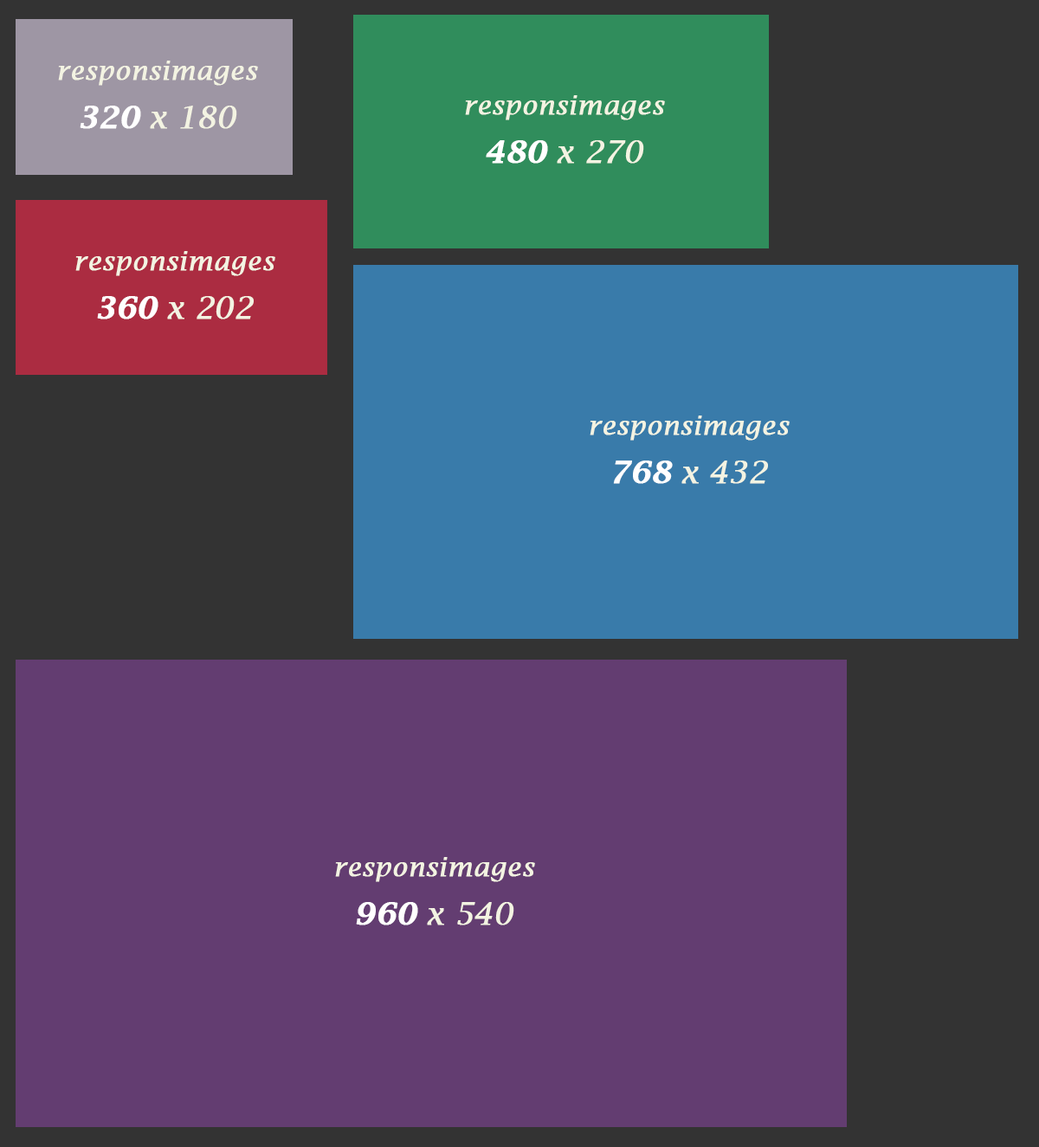
<style>
.page{position:relative;width:1039px;height:1147px;background:#633d71}
.page>*{position:absolute;margin:0}
.t1{font:26px/24.2px "LucidaBright-Italic";letter-spacing:0.025em;color:#f3f3e2;font-weight:bold}
.t2{font:31.2px/24.2px "LucidaBright-DemiItalic";color:#ffffff;font-weight:bold}
.t3{font:31.2px/24.2px "LucidaBright-Italic";color:#f3f3e2;font-weight:bold}
</style>
<div class="page">
<p class="t1" style="left:58px;top:61px;width:200px;height:68px;text-align:center">responsimages<br><br><span class="t2">320</span><span class="t3"> x 180</span></p>
<p class="t1" style="left:465px;top:95px;width:200px;height:69px;text-align:center">responsimages<br><br><span class="t2">480</span><span class="t3"> x 270</span></p>
<p class="t1" style="left:75px;top:251px;width:200px;height:69px;text-align:center">responsimages<br><br><span class="t2">360</span><span class="t3"> x 202</span></p>
<p class="t1" style="left:590px;top:416px;width:200px;height:68px;text-align:center">responsimages<br><br><span class="t2">768</span><span class="t3"> x 432</span></p>
<p class="t1" style="left:335px;top:857px;width:200px;height:69px;text-align:center">responsimages<br><br><span class="t2">960</span><span class="t3"> x 540</span></p>
</div>
